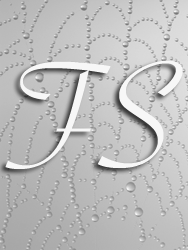
<style>
.page{position:relative;width:188px;height:250px}
.page>*{position:absolute;margin:0}
.t1{font:161px "SavoyeLetPlain";color:#f7f7f7}
</style>
<div class="page">
<p class="t1" style="left:5px;top:60px;width:178px;height:109px">FS</p>
</div>
